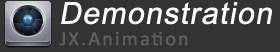
<style>
.page{position:relative;width:280px;height:52px;background:#333333}
.page>*{position:absolute;margin:0}
.t1{font:30px "DokChampa";letter-spacing:0.02em;color:#ffffff;font-weight:bold;font-style:italic}
.t2{font:20px "Calibri";letter-spacing:0.085em;color:#5d5e5f;font-weight:bold}
</style>
<div class="page">
<p class="t1" style="left:61px;top:2px;width:211px;height:23px">Demonstration</p>
<p class="t2" style="left:59px;top:32px;width:129px;height:14px">JX.Animation</p>
</div>
